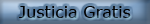
<style>
.page{position:relative;width:150px;height:24px}
.page>*{position:absolute;margin:0}
.t1{font:16px "Verdana";color:#000000}
</style>
<div class="page">
<p class="t1" style="left:19px;top:6px;width:112px;height:12px">Justicia Gratis</p>
</div>
